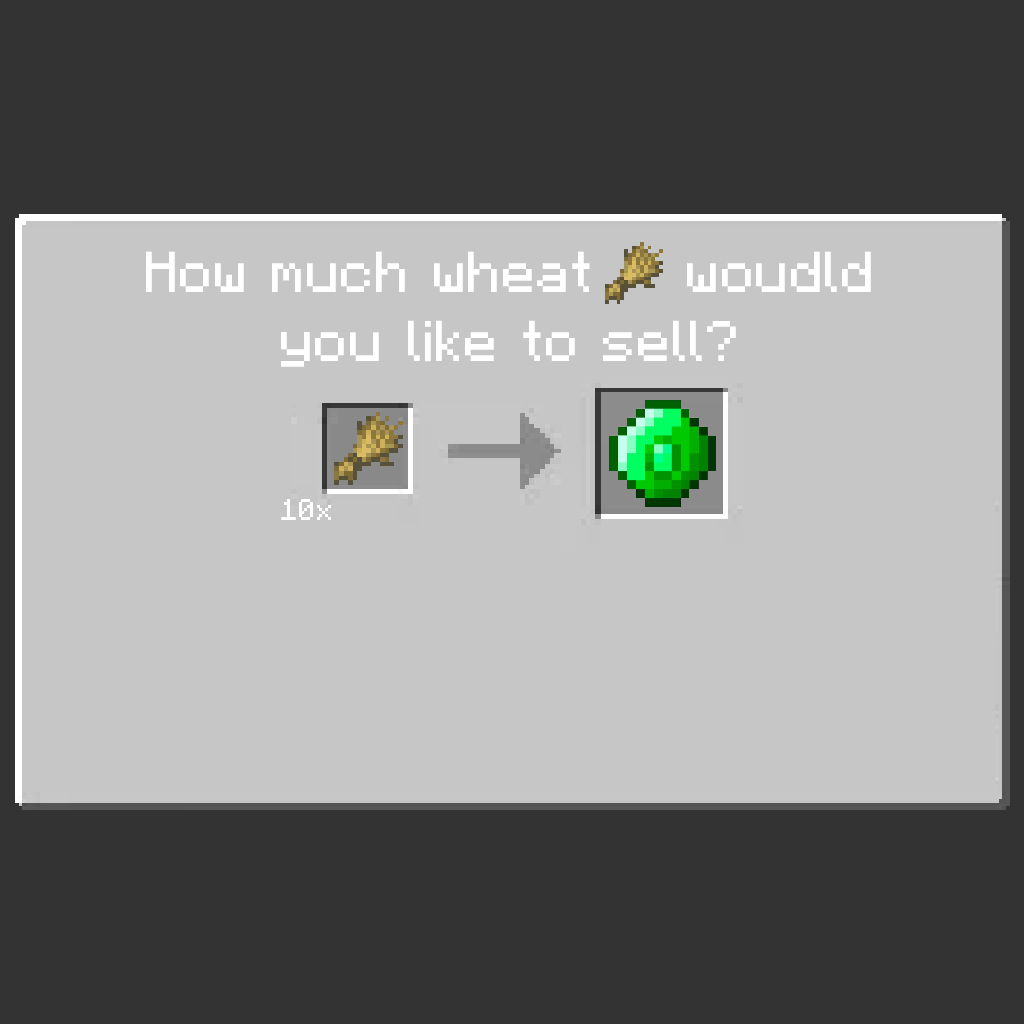
<style>
.page{position:relative;width:1024px;height:1024px;background:#c6c6c6}
.page>*{position:absolute;margin:0}
.t1{font:57.6px "Minecraft-Regular";color:#ffffff}
.t2{font:29.5px "Minecraft-Regular";color:#ffffff}
</style>
<div class="page">
<p class="t1" style="left:146px;top:251px;width:725px;height:116px;text-align:center">How much wheat    woudld you like to sell?</p>
<p class="t2" style="left:281px;top:499px;width:50px;height:21px">10x</p>
</div>
